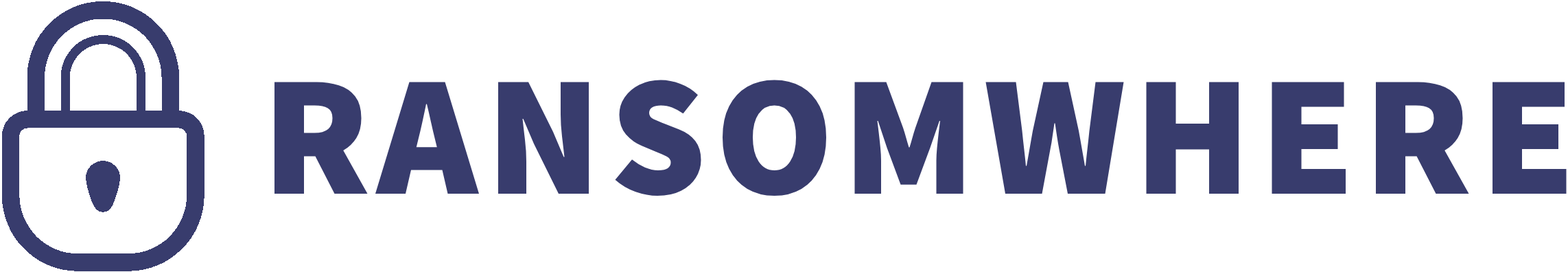
<style>
.page{position:relative;width:1568px;height:272px;background:#ffffff}
.page>*{position:absolute;margin:0}
.t1{font:171.6px "SourceSansPro-Black";letter-spacing:0.05em;color:#383c6d}
</style>
<div class="page">
<p class="t1" style="left:274px;top:80px;width:1293px;height:116px">RANSOMWHERE</p>
</div>
